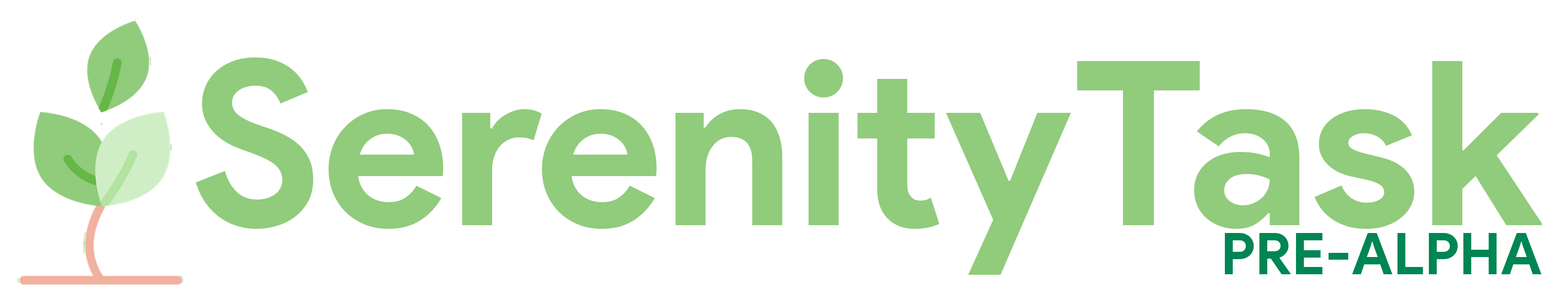
<style>
.page{position:relative;width:1568px;height:303px;background:#ffffff}
.page>*{position:absolute;margin:0}
.t1{font:228.8px "ProductSans-Bold";color:#91cb7c}
.t2{font:58.3px "ProductSans-Bold";color:#008554}
</style>
<div class="page">
<p class="t1" style="left:196px;top:58px;width:1346px;height:217px">SerenityTask</p>
<p class="t2" style="left:1224px;top:233px;width:318px;height:42px">PRE-ALPHA</p>
</div>
